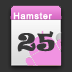
<style>
.page{position:relative;width:72px;height:72px;background:#333333}
.page>*{position:absolute;margin:0}
.t1{font:8.9px "ArialMT";letter-spacing:0.06em;color:#ffffff;font-weight:bold}
.t2{font:21.7px "Ravie";letter-spacing:0.06em;color:#393939;font-weight:bold}
</style>
<div class="page">
<p class="t1" style="left:13px;top:12px;width:39px;height:8px">Hamster</p>
<p class="t2" style="left:17px;top:31px;width:38px;height:21px">25</p>
</div>
